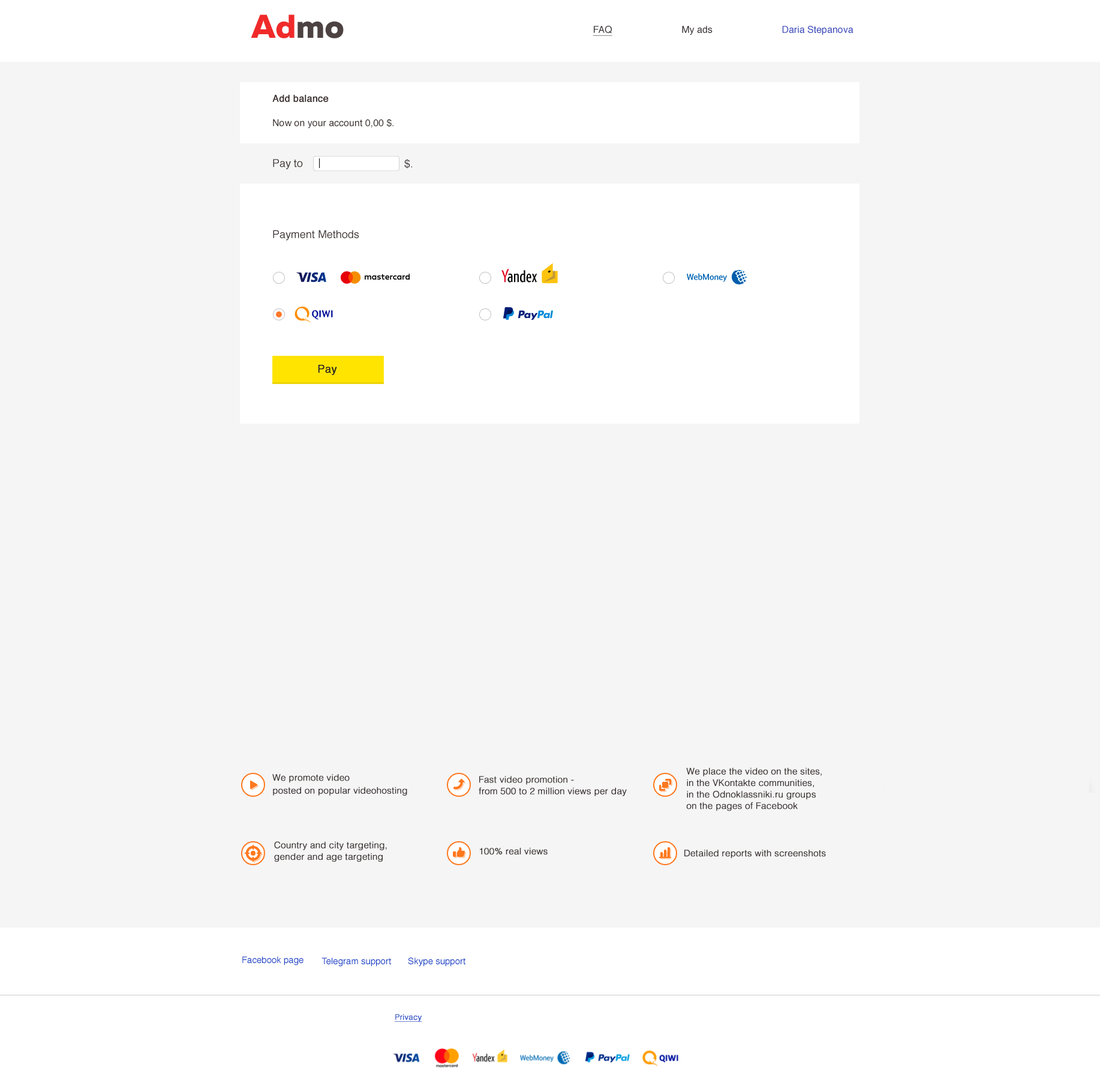
<style>
.page{position:relative;width:1100px;height:1086px;background:#f5f5f5}
.page>*{position:absolute;margin:0}
.t1{font:33px "MullerExtraBold";color:#f02a2a}
.t2{font:33px "MullerExtraBold";color:#4d4242}
.t3{font:9.6px "Helvetica";color:#3444ba}
.t4{font:9.6px "Helvetica";color:#302a2a;text-decoration:underline}
.t5{font:9.6px "Helvetica";color:#302a2a}
.t6{font:9.6px/1.4px "Helvetica";color:#3b3030}
.t7{font:9.6px/1.4px "Helvetica";color:#3b3030;font-weight:bold}
.t8{font:10.8px "Helvetica";color:#3b3030}
.t9{font:10.8px "Helvetica";color:#2a2424;font-weight:bold}
.t10{font:9px/1.4px "Helvetica-Light";color:#3e3535;font-weight:bold}
.t11{font:9px "Helvetica-Light";color:#3e3535;font-weight:bold}
.t12{font:9px "Helvetica";color:#1e46c6}
.t13{font:7.8px "Helvetica-Light";color:#1e46c6;font-weight:bold;text-decoration:underline}
</style>
<div class="page">
<p class="t1" style="left:251px;top:14px;width:93px;height:24px">Ad<span class="t2">mo</span></p>
<p class="t3" style="left:593px;top:26px;width:261px;height:10px"><span class="t4">FAQ</span><span class="t5">                          My ads                          </span>Daria Stepanova</p>
<p class="t6" style="left:272px;top:95px;width:122px;height:33px"><span class="t7">Add balance<br><br><br><br></span><br><br><br><br><br><br><br><br><br><br><br><br><br>Now on your account 0,00 $.</p>
<p class="t8" style="left:273px;top:159px;width:30px;height:10px">Pay to</p>
<p class="t8" style="left:404px;top:159px;width:8px;height:10px">$.</p>
<p class="t8" style="left:273px;top:230px;width:86px;height:11px">Payment Methods</p>
<p class="t9" style="left:318px;top:365px;width:19px;height:10px">Pay</p>
<p class="t10" style="left:272px;top:774px;width:135px;height:22px">We promote video <br><br><br><br><br><br><br><br><br>posted on popular videohosting</p>
<p class="t10" style="left:686px;top:767px;width:136px;height:44px">We place the video on the sites, <br><br><br><br><br><br><br><br>in the VKontakte communities, <br><br><br><br><br><br><br><br>in the Odnoklassniki.ru groups <br><br><br><br><br><br><br><br>on the pages of Facebook</p>
<p class="t10" style="left:479px;top:776px;width:148px;height:20px">Fast video promotion - <br><br><br><br><br><br><br><br>from 500 to 2 million views per day</p>
<p class="t10" style="left:274px;top:841px;width:113px;height:21px">Country and city targeting, <br><br><br><br><br><br><br><br>gender and age targeting</p>
<p class="t11" style="left:479px;top:848px;width:69px;height:7px">100% real views</p>
<p class="t11" style="left:685px;top:850px;width:141px;height:9px">Detailed reports with screenshots</p>
<p class="t12" style="left:242px;top:956px;width:62px;height:9px">Facebook page</p>
<p class="t12" style="left:322px;top:958px;width:69px;height:9px">Telegram support</p>
<p class="t12" style="left:408px;top:958px;width:58px;height:9px">Skype support</p>
<p class="t13" style="left:395px;top:1014px;width:27px;height:8px">Privacy</p>
</div>
